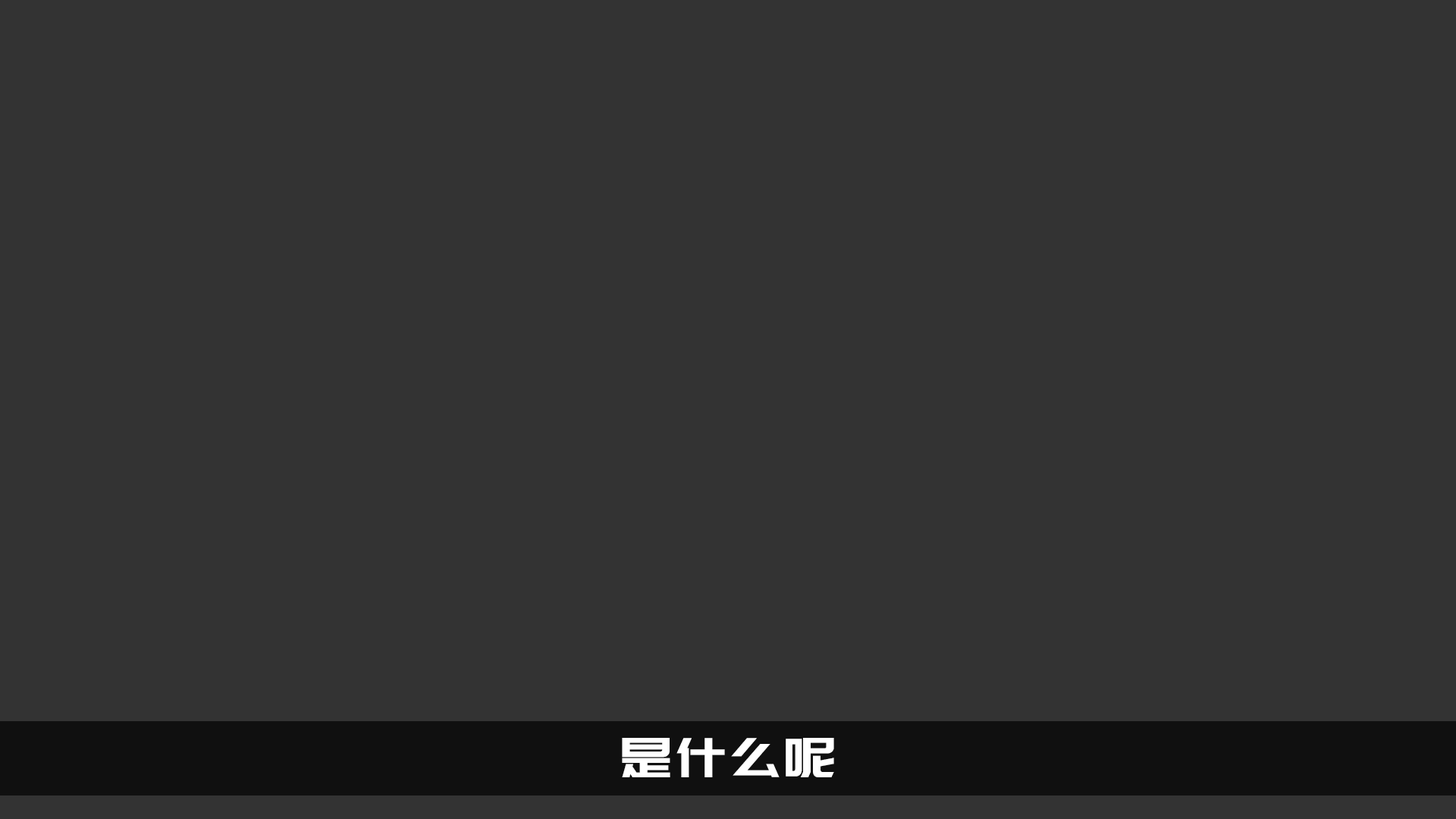
<style>
.page{position:relative;width:1456px;height:819px;background:#333333}
.page>*{position:absolute;margin:0}
.t1{font:54.6px "PangMenZhengDao-3";color:#ffffff}
</style>
<div class="page">
<p class="t1" style="left:622px;top:738px;width:212px;height:39px">是什么呢</p>
</div>
